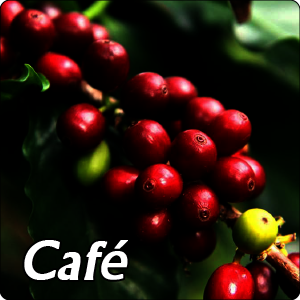
<style>
.page{position:relative;width:300px;height:300px}
.page>*{position:absolute;margin:0}
.t1{font:55.6px "Narkisim";color:#ffffff;font-weight:bold;font-style:italic}
.t2{font:55.6px "MyriadPro-Regular";color:#ffffff;font-weight:bold;font-style:italic}
</style>
<div class="page">
<p class="t1" style="left:24px;top:240px;width:104px;height:40px">Caf<span class="t2">é</span></p>
</div>
